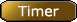
<style>
.page{position:relative;width:77px;height:22px;background:#68450a}
.page>*{position:absolute;margin:0}
.t1{font:14px "Verdana";color:#ffffff}
</style>
<div class="page">
<p class="t1" style="left:18px;top:5px;width:41px;height:12px">Timer</p>
</div>
